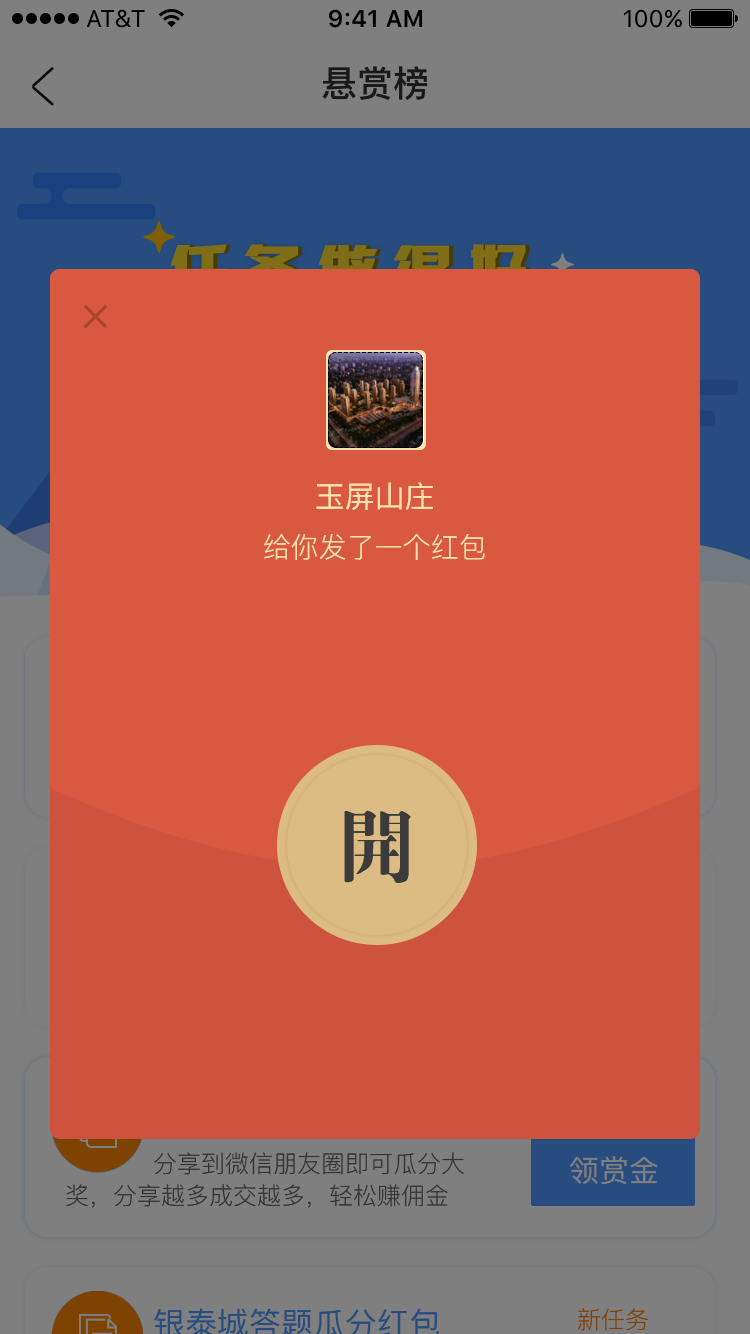
<style>
.page{position:relative;width:750px;height:1334px;background:#d95940}
.page>*{position:absolute;margin:0}
.t1{font:36px "PingFang-SC-Bold";color:#191919}
.t2{font:30px "PingFang-SC-Medium";color:#ffe2b1}
.t3{font:28px "PingFang-SC-Regular";color:#ffe2b1}
.t4{font:80px "FZDBSFW--GB1-0";color:#3b3b3b}
.t5{font:24px/32px "PingFang-SC-Regular";color:#333333}
.t6{font:30px "PingFang-SC-Medium";color:#7f7f7f}
.t7{font:24px "PingFang-SC-Regular";color:#7f4200}
</style>
<div class="page">
<p class="t1" style="left:322px;top:66px;width:106px;height:34px">悬赏榜</p>
<p class="t2" style="left:316px;top:482px;width:117px;height:29px">玉屏山庄</p>
<p class="t3" style="left:264px;top:534px;width:221px;height:26px">给你发了一个红包</p>
<p class="t4" style="left:344px;top:810px;width:67px;height:73px">开</p>
<p class="t5" style="left:66px;top:1152px;width:398px;height:56px">分享到微信朋友圈即可瓜分大<br>奖，分享越多成交越多，轻松赚佣金</p>
<p class="t6" style="left:570px;top:1156px;width:88px;height:29px">领赏金</p>
<p class="t7" style="left:578px;top:1308px;width:70px;height:23px">新任务</p>
</div>
